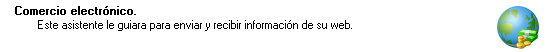
<style>
.page{position:relative;width:552px;height:52px;background:#ffffff}
.page>*{position:absolute;margin:0}
.t1{font:11.4px "MS Sans Serif";color:#000000;font-weight:bold}
.t2{font:11.4px "MS Sans Serif";color:#000000}
</style>
<div class="page">
<p class="t1" style="left:15px;top:6px;width:121px;height:9px">Comercio electrónico.</p>
<p class="t2" style="left:38px;top:20px;width:314px;height:11px">Este asistente le guiara para enviar y recibir información de su web.</p>
</div>
